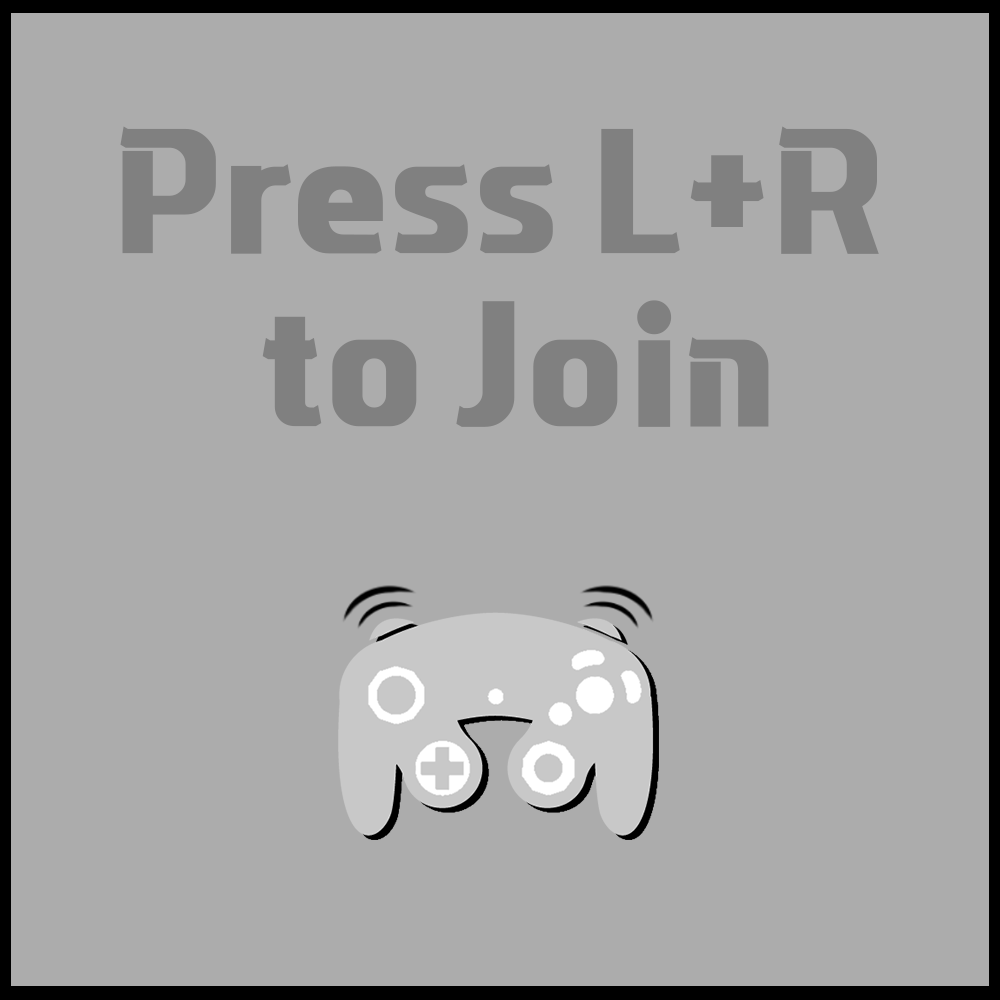
<style>
.page{position:relative;width:1000px;height:1000px;background:#acacac}
.page>*{position:absolute;margin:0}
.t1{font:144px "BenmoJinhei";color:#808080}
</style>
<div class="page">
<p class="t1" style="left:120px;top:126px;width:759px;height:301px;text-align:center">Press L+R<br> to Join</p>
</div>
